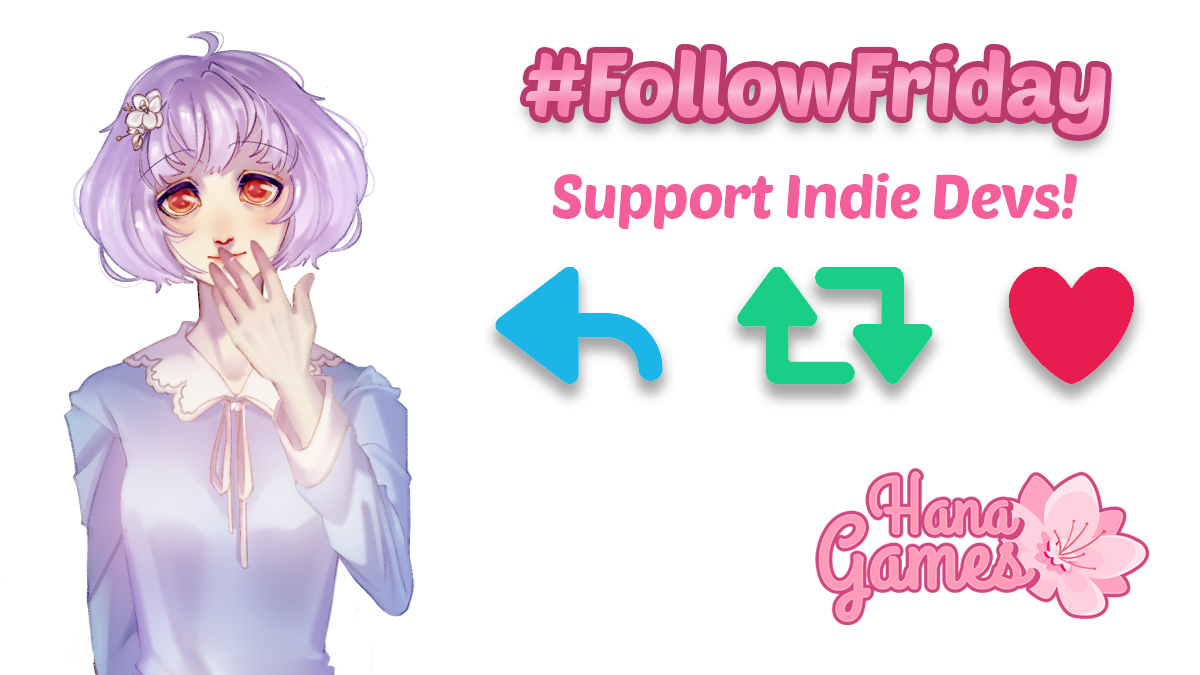
<style>
.page{position:relative;width:1200px;height:675px;background:#ffffff}
.page>*{position:absolute;margin:0}
.t1{font:90px "PoetsenOne-Regular";letter-spacing:-0.02em;color:#f894bc}
.t2{font:60px "PoetsenOne-Regular";letter-spacing:-0.02em;color:#f45e9a}
</style>
<div class="page">
<p class="t1" style="left:526px;top:49px;width:580px;height:86px">#FollowFriday</p>
<p class="t2" style="left:552px;top:173px;width:525px;height:56px">Support Indie Devs!</p>
</div>
